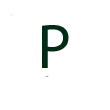
<style>
.page{position:relative;width:110px;height:110px;background:#ffffff}
.page>*{position:absolute;margin:0}
.t1{font:64px "MyriadHebrew-Regular";color:#022b15}
</style>
<div class="page">
<p class="t1" style="left:42px;top:25px;width:27px;height:43px">P</p>
</div>
